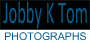
<style>
.page{position:relative;width:90px;height:43px;background:#000102}
.page>*{position:absolute;margin:0}
.t1{font:31.7px "Calibri";color:#095d8b;scale:0.52 1}
.t2{font:10.6px "AksharUnicode";color:#095d8b}
</style>
<div class="page">
<p class="t1" style="left:3px;top:1px;width:84px;height:28px">Jobby K Tom</p>
<p class="t2" style="left:5px;top:32px;width:81px;height:8px">PHOTOGRAPHS</p>
</div>
